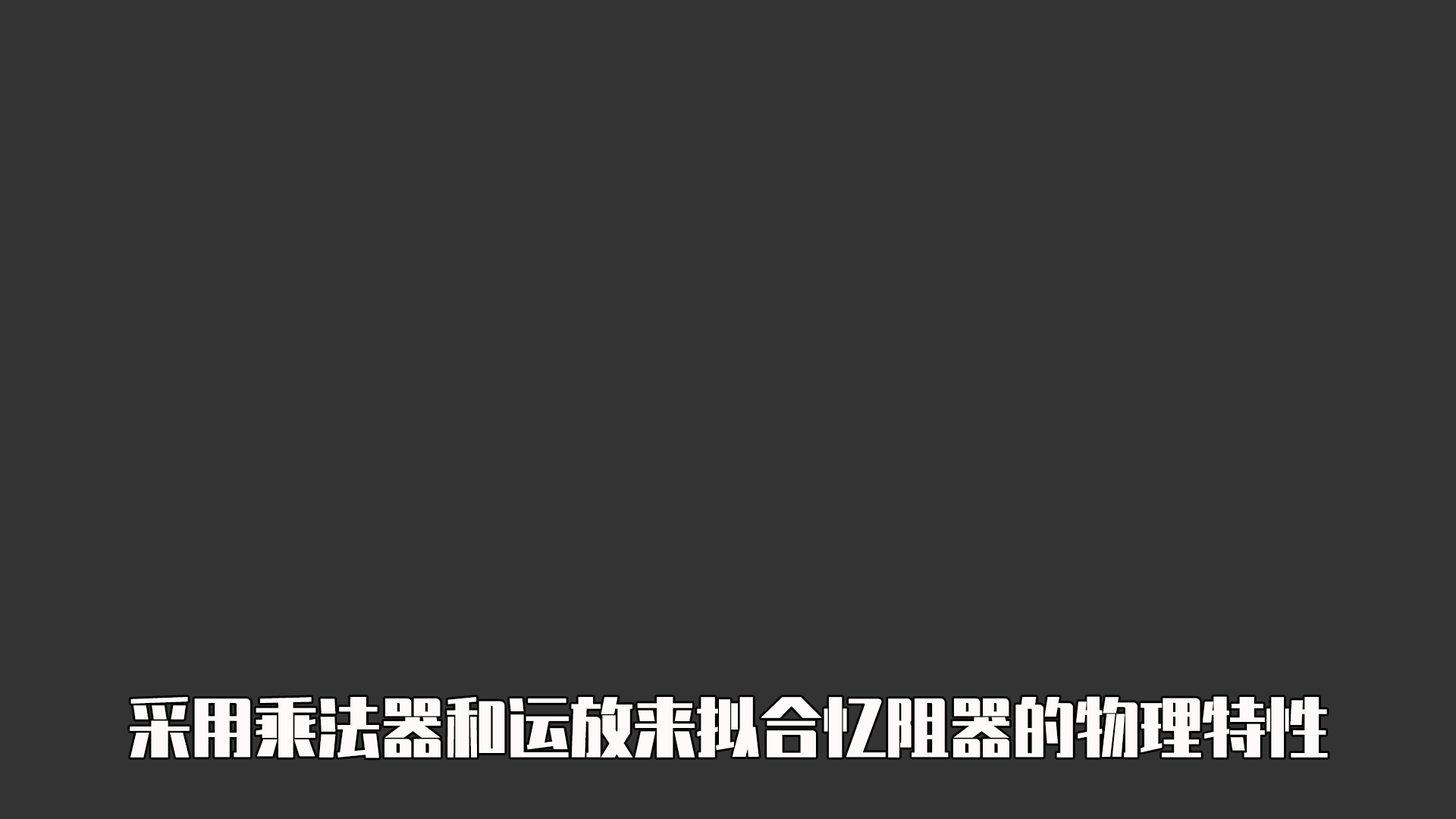
<style>
.page{position:relative;width:1456px;height:819px;background:#333333}
.page>*{position:absolute;margin:0}
.t1{font:63.2px "ZhenyanGB-Regular";color:#fefafa}
</style>
<div class="page">
<p class="t1" style="left:130px;top:696px;width:1198px;height:62px">采用乘法器和运放来拟合忆阻器的物理特性</p>
</div>
